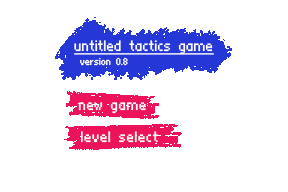
<style>
.page{position:relative;width:288px;height:192px;background:#ffffff}
.page>*{position:absolute;margin:0}
.t1{font:24px "at01";color:#ffffff;text-decoration:underline}
.t2{font:16px "at01";color:#ffffff}
.t3{font:24px "at01";color:#ffffff}
</style>
<div class="page">
<p class="t1" style="left:74px;top:40px;width:140px;height:15px">untitled tactics game</p>
<p class="t2" style="left:80px;top:57px;width:48px;height:9px">version 0.8</p>
<p class="t3" style="left:78px;top:102px;width:68px;height:12px">new game</p>
<p class="t3" style="left:81px;top:131px;width:77px;height:12px">level select</p>
</div>
